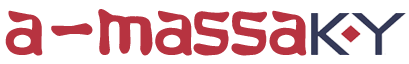
<style>
.page{position:relative;width:409px;height:64px;background:#ffffff}
.page>*{position:absolute;margin:0}
.t1{font:93px "Korean-Calligraphy";letter-spacing:-0.02em;color:#b73340}
</style>
<div class="page">
<p class="t1" style="left:5px;top:9px;width:302px;height:47px">A-massa</p>
</div>
